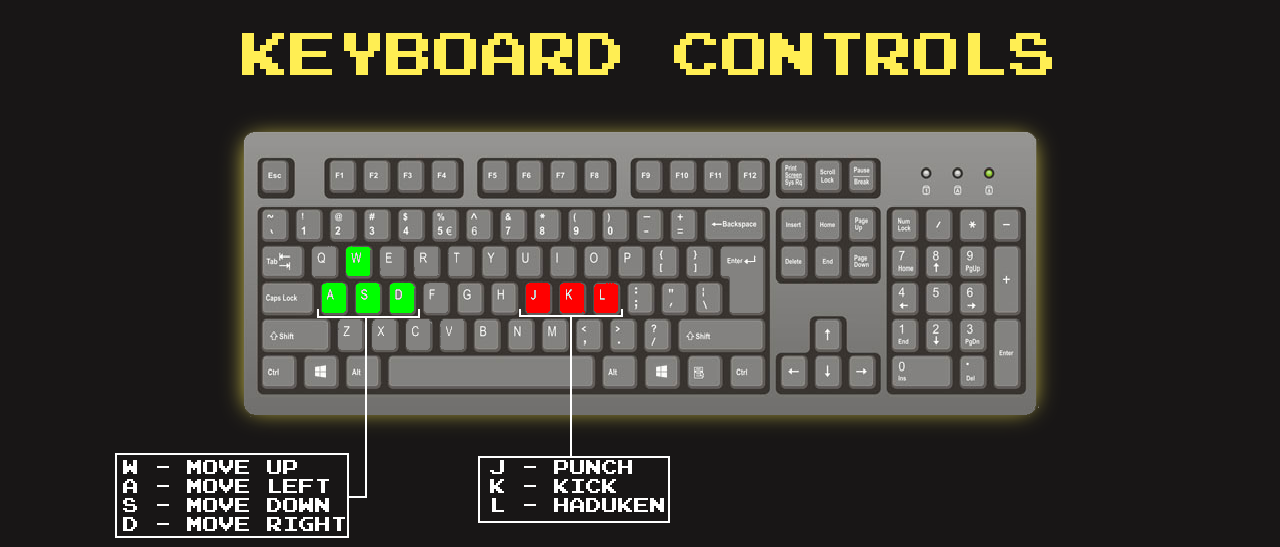
<style>
.page{position:relative;width:1280px;height:547px;background:#181616}
.page>*{position:absolute;margin:0}
.t1{font:48px "PressStart2P";color:#ffee53}
.t2{font:16px "PressStart2P";color:#ffffff}
</style>
<div class="page">
<p class="t1" style="left:242px;top:33px;width:810px;height:42px">KEYBOARD CONTROLS</p>
<p class="t2" style="left:123px;top:460px;width:222px;height:71px">W - MOVE UP<br>A - MOVE LEFT<br>S - MOVE DOWN<br>D - MOVE RIGHT</p>
<p class="t2" style="left:490px;top:460px;width:174px;height:52px">J - PUNCH<br>K - KICK<br>L - HADUKEN</p>
</div>
